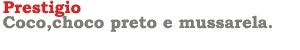
<style>
.page{position:relative;width:300px;height:50px;background:#ffffff}
.page>*{position:absolute;margin:0}
.t1{font:17px "BookmanOldStyle-Bold";color:#d42525}
.t2{font:17px "BookmanOldStyle-Bold";color:#7c7c79}
</style>
<div class="page">
<p class="t1" style="left:3px;top:0px;width:78px;height:17px">Prestigio</p>
<p class="t2" style="left:3px;top:15px;width:269px;height:17px">Coco,choco preto e mussarela.</p>
</div>
